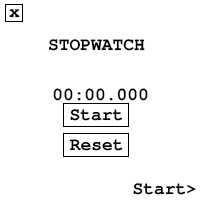
<style>
.page{position:relative;width:200px;height:200px;background:#ffffff}
.page>*{position:absolute;margin:0}
.t1{font:17.9px "FreeMonoBold";color:#000000}
</style>
<div class="page">
<p class="t1" style="left:9px;top:9px;width:11px;height:9px">x</p>
<p class="t1" style="left:48px;top:39px;width:97px;height:12px">STOPWATCH</p>
<p class="t1" style="left:53px;top:88px;width:95px;height:13px">00:00.000</p>
<p class="t1" style="left:70px;top:109px;width:53px;height:12px">Start</p>
<p class="t1" style="left:69px;top:139px;width:54px;height:12px">Reset</p>
<p class="t1" style="left:133px;top:183px;width:63px;height:12px">Start&gt;</p>
</div>
